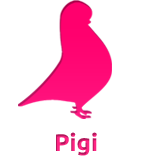
<style>
.page{position:relative;width:150px;height:156px;background:#ffffff}
.page>*{position:absolute;margin:0}
.t1{font:24.1px "Ubuntu-Bold"}
</style>
<div class="page">
<p class="t1" style="left:56px;top:132px;width:41px;height:24px">Pigi</p>
</div>
